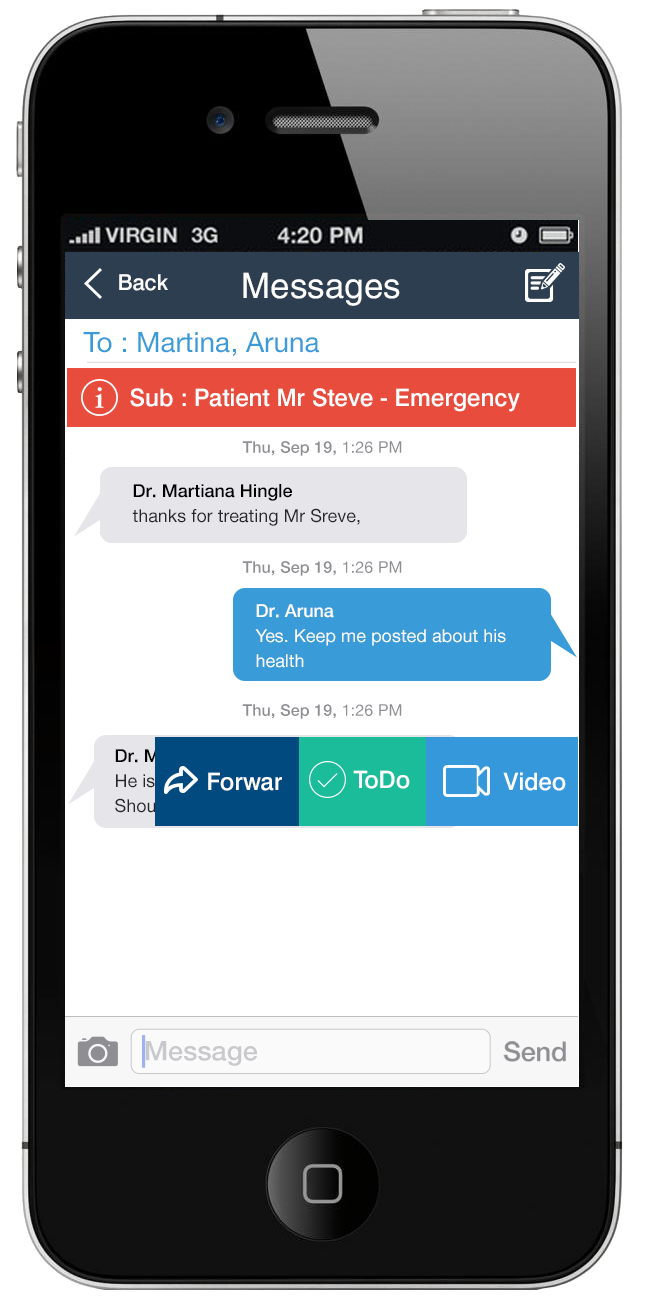
<style>
.page{position:relative;width:648px;height:1300px;background:#ffffff}
.page>*{position:absolute;margin:0}
.t1{font:22px "Swiss721BT-Medium";color:#ffffff}
.t2{font:35px "HelveticaLT";color:#ffffff}
.t3{font:28px "HelveticaNeue";color:#399cd9}
.t4{font:24px "Swiss721BT-Medium";color:#ffffff}
.t5{font:16px "HelveticaNeueMedium";letter-spacing:0.01em;color:#8e8e93}
.t6{font:16px "HelveticaNeue";letter-spacing:0.01em;color:#8e8e93}
.t7{font:18px/25px "HelveticaNeue";color:#262626}
.t8{font:18px/25px "HelveticaNeueMedium";color:#000000}
.t9{font:18px/25px "HelveticaNeue";color:#ffffff}
.t10{font:18px/25px "HelveticaNeueMedium";color:#ffffff}
.t11{font:27px "HelveticaNeueLT-Medium";color:#c8c8cd}
.t12{font:27px "HelveticaNeue-Medium";letter-spacing:-0.01em;color:#8e8e93}
</style>
<div class="page">
<p class="t1" style="left:119px;top:274px;width:49px;height:17px">Back</p>
<p class="t2" style="left:243px;top:272px;width:157px;height:34px">Messages</p>
<p class="t3" style="left:83px;top:332px;width:236px;height:24px">To : Martina, Aruna</p>
<p class="t4" style="left:130px;top:388px;width:390px;height:24px">Sub : Patient Mr Steve - Emergency</p>
<p class="t5" style="left:242px;top:441px;width:160px;height:15px">Thu, Sep 19, <span class="t6">1:26 PM</span></p>
<p class="t7" style="left:132px;top:484px;width:228px;height:42px"><span class="t8">Dr. Martiana Hingle<br></span>thanks for treating Mr Sreve,</p>
<p class="t5" style="left:242px;top:561px;width:160px;height:15px">Thu, Sep 19, <span class="t6">1:26 PM</span></p>
<p class="t9" style="left:255px;top:604px;width:251px;height:64px"><span class="t10">Dr. Aruna<br></span>Yes. Keep me posted about his <br>health</p>
<p class="t5" style="left:242px;top:704px;width:160px;height:15px">Thu, Sep 19, <span class="t6">1:26 PM</span></p>
<p class="t4" style="left:208px;top:772px;width:74px;height:19px">Forward</p>
<p class="t4" style="left:353px;top:770px;width:57px;height:19px">ToDo</p>
<p class="t4" style="left:503px;top:772px;width:63px;height:19px">Video</p>
<p class="t11" style="left:145px;top:1041px;width:112px;height:25px">Message</p>
<p class="t12" style="left:503px;top:1041px;width:63px;height:21px">Send</p>
</div>
